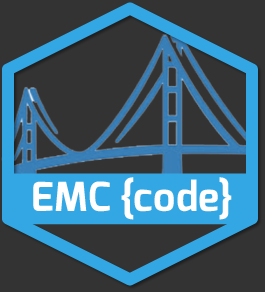
<style>
.page{position:relative;width:265px;height:292px;background:#333333}
.page>*{position:absolute;margin:0}
.t1{font:40px "Exo-Bold";color:#ffffff}
</style>
<div class="page">
<p class="t1" style="left:33px;top:177px;width:199px;height:43px">EMC {code}</p>
</div>
